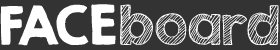
<style>
.page{position:relative;width:280px;height:50px;background:#333333}
.page>*{position:absolute;margin:0}
.t1{font:48px "KGSecondChancesSketch";color:#ffffff}
.t2{font:48px "KGSecondChancesSolid";color:#ffffff}
</style>
<div class="page">
<p class="t1" style="left:0px;top:4px;width:279px;height:42px"><span class="t2">FACE</span>board</p>
</div>
